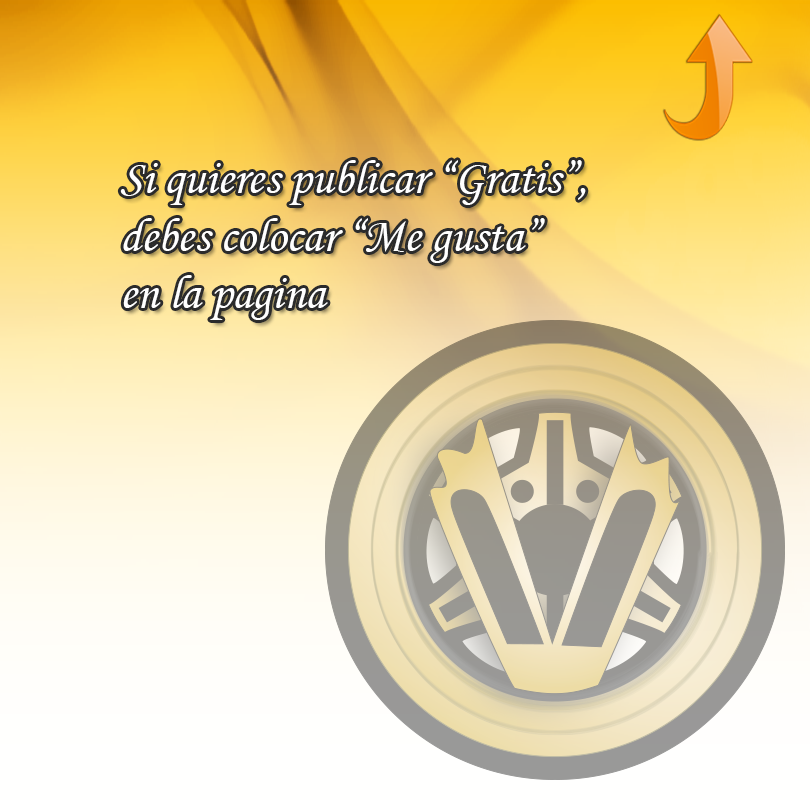
<style>
.page{position:relative;width:810px;height:800px}
.page>*{position:absolute;margin:0}
.t1{font:48px "MonotypeCorsiva";color:#ffffff}
</style>
<div class="page">
<p class="t1" style="left:120px;top:160px;width:466px;height:160px">Si quieres publicar “Gratis”, <br>debes colocar “Me gusta”<br>en la pagina</p>
</div>
